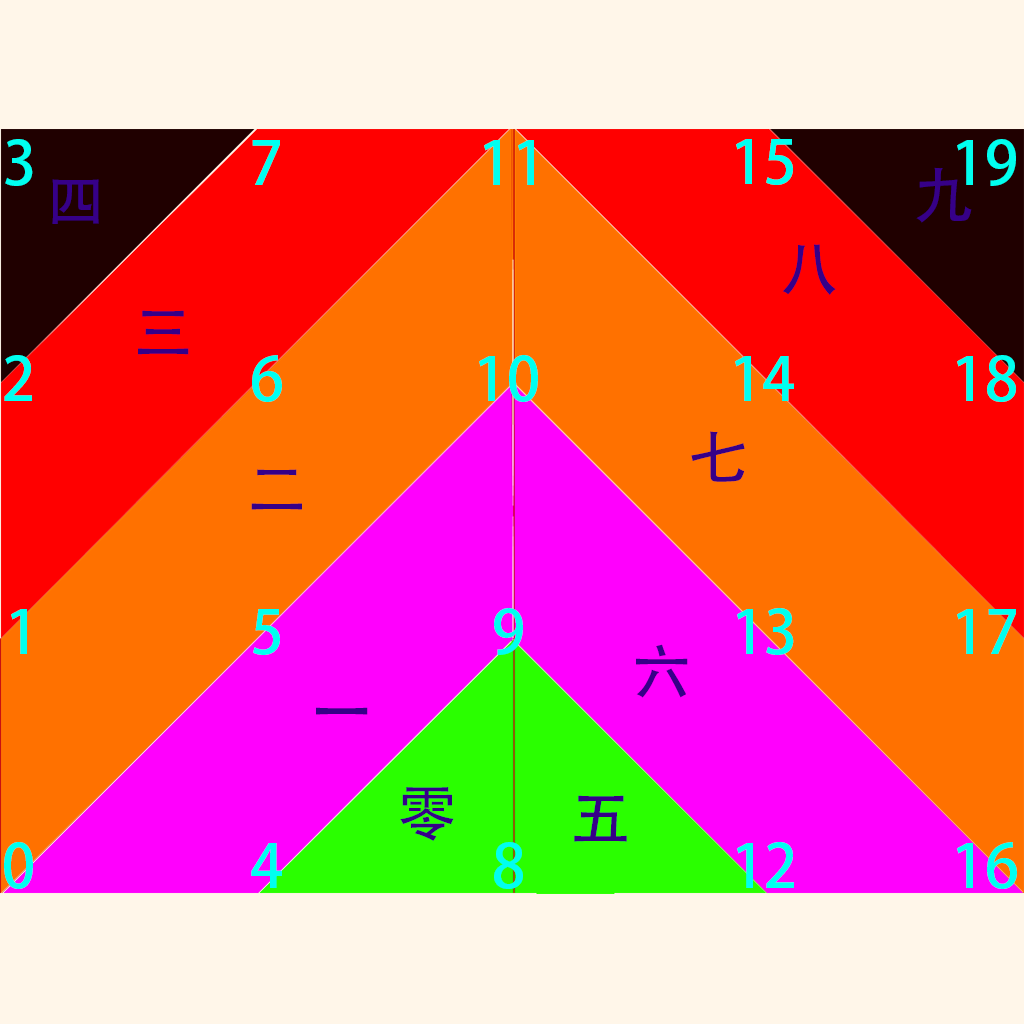
<style>
.page{position:relative;width:1024px;height:1024px;background:#fff6e9}
.page>*{position:absolute;margin:0}
.t1{font:59.9px "AdobeHeitiStd-Regular";color:#00fff0}
.t2{font:59.9px "AdobeHeitiStd-Regular";color:#360088}
</style>
<div class="page">
<p class="t1" style="left:5px;top:139px;width:28px;height:47px">3</p>
<p class="t1" style="left:252px;top:140px;width:28px;height:45px">7</p>
<p class="t1" style="left:484px;top:140px;width:50px;height:45px">11</p>
<p class="t1" style="left:736px;top:139px;width:57px;height:46px">15</p>
<p class="t1" style="left:957px;top:139px;width:59px;height:47px">19</p>
<p class="t2" style="left:916px;top:167px;width:56px;height:56px">九</p>
<p class="t2" style="left:52px;top:179px;width:47px;height:45px">四</p>
<p class="t2" style="left:782px;top:244px;width:54px;height:51px">八</p>
<p class="t2" style="left:138px;top:310px;width:51px;height:45px">三</p>
<p class="t1" style="left:4px;top:355px;width:28px;height:46px">2</p>
<p class="t1" style="left:252px;top:355px;width:30px;height:47px">6</p>
<p class="t1" style="left:479px;top:355px;width:59px;height:47px">10</p>
<p class="t1" style="left:735px;top:356px;width:59px;height:45px">14</p>
<p class="t1" style="left:957px;top:355px;width:59px;height:47px">18</p>
<p class="t2" style="left:691px;top:431px;width:54px;height:51px">七</p>
<p class="t2" style="left:251px;top:469px;width:51px;height:41px">二</p>
<p class="t1" style="left:11px;top:609px;width:16px;height:45px">1</p>
<p class="t1" style="left:253px;top:609px;width:27px;height:46px">5</p>
<p class="t1" style="left:494px;top:608px;width:29px;height:47px">9</p>
<p class="t1" style="left:737px;top:608px;width:57px;height:47px">13</p>
<p class="t1" style="left:957px;top:609px;width:59px;height:45px">17</p>
<p class="t2" style="left:636px;top:644px;width:52px;height:54px">六</p>
<p class="t2" style="left:316px;top:707px;width:52px;height:8px">一</p>
<p class="t2" style="left:400px;top:787px;width:54px;height:54px">零</p>
<p class="t2" style="left:574px;top:795px;width:53px;height:47px">五</p>
<p class="t1" style="left:4px;top:842px;width:29px;height:47px">0</p>
<p class="t1" style="left:251px;top:843px;width:31px;height:45px">4</p>
<p class="t1" style="left:494px;top:842px;width:29px;height:47px">8</p>
<p class="t1" style="left:737px;top:842px;width:57px;height:46px">12</p>
<p class="t1" style="left:957px;top:842px;width:60px;height:47px">16</p>
</div>
